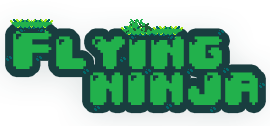
<style>
.page{position:relative;width:270px;height:126px;background:#193d3f}
.page>*{position:absolute;margin:0}
.t1{font:46px/36px "04b30";color:#22b14c}
</style>
<div class="page">
<p class="t1" style="left:13px;top:31px;width:245px;height:74px;text-align:center">Flying <br>  ninja</p>
</div>
